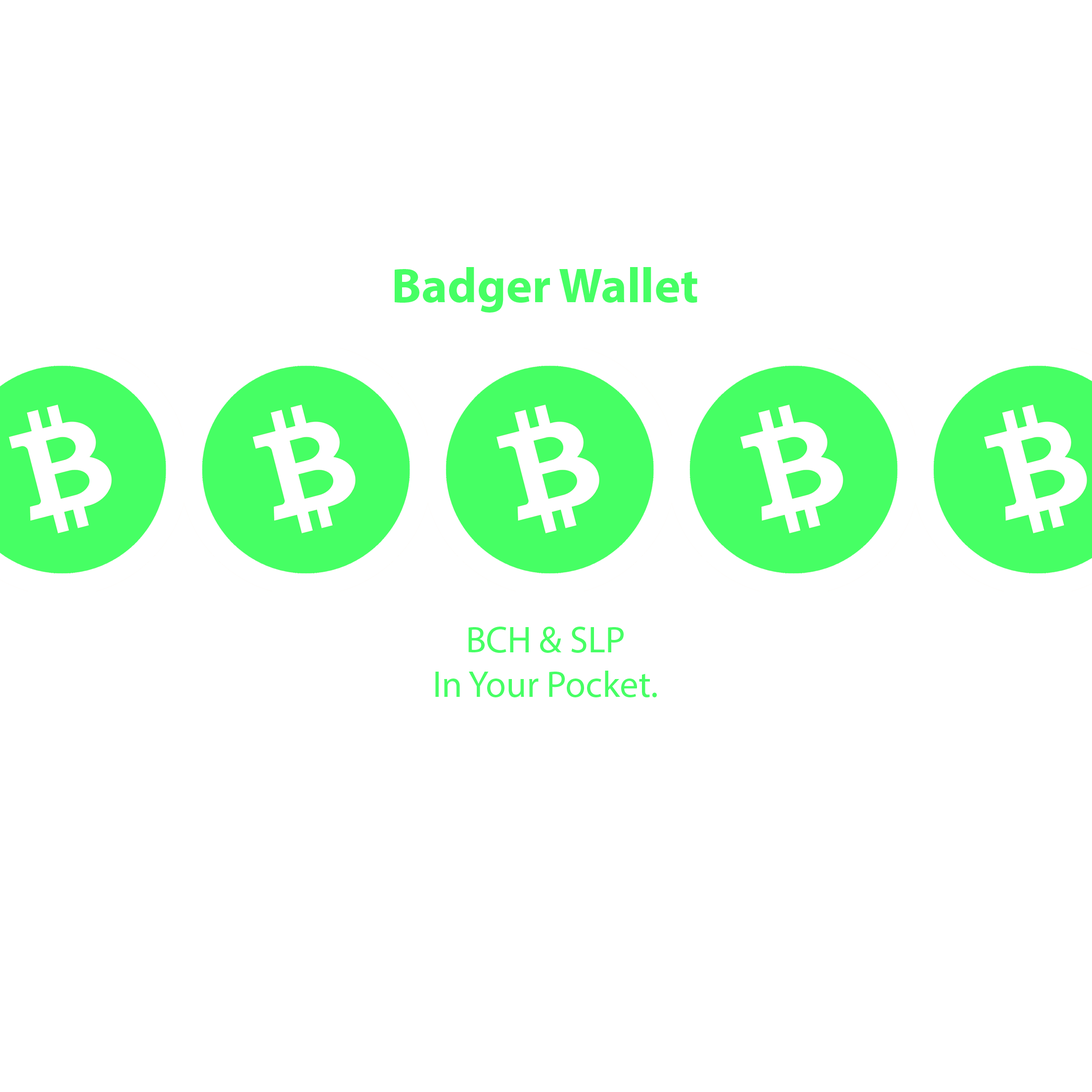
<style>
.page{position:relative;width:1092px;height:1092px;background:#ffffff}
.page>*{position:absolute;margin:0}
.t1{font:49.5px "MyriadPro-Bold";color:#46ff64}
.t2{font:37.1px "MyriadPro-Regular";color:#46ff64}
</style>
<div class="page">
<p class="t1" style="left:395px;top:267px;width:302px;height:46px">Badger Wallet</p>
<p class="t2" style="left:435px;top:627px;width:222px;height:70px;text-align:center">BCH &amp; SLP<br>In Your Pocket.</p>
</div>
